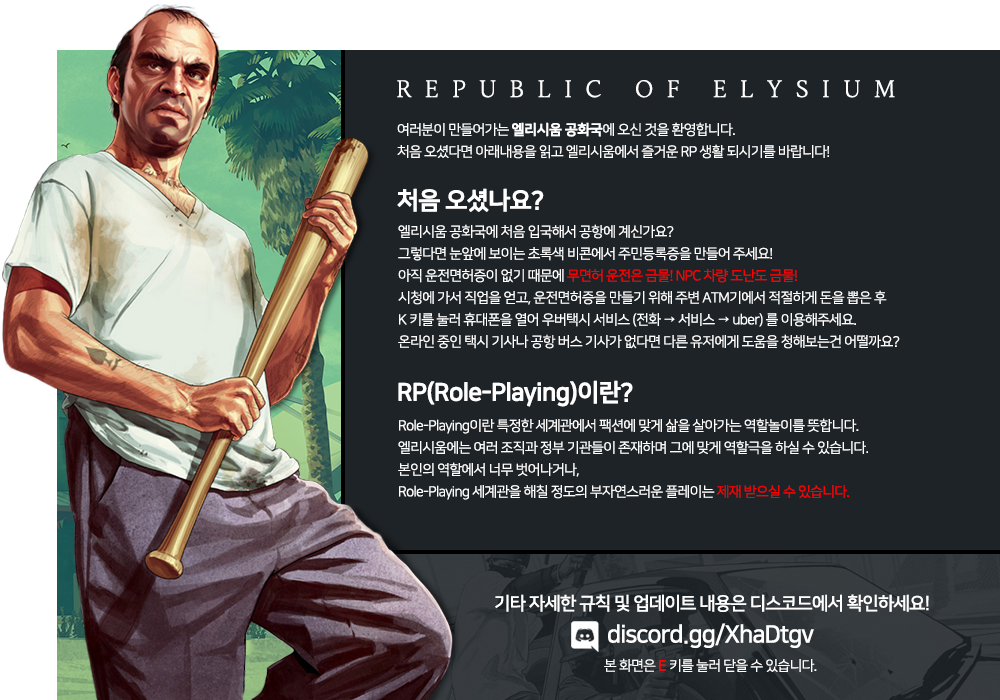
<style>
.page{position:relative;width:1000px;height:700px;background:#1e2327}
.page>*{position:absolute;margin:0}
.t1{font:24px "Arita-buri-Medium_TTF";letter-spacing:0.55em;color:#ffffff}
.t2{font:14px/22px "NanumSquareR";letter-spacing:-0.045em;color:#ffffff}
.t3{font:14px/22px "NanumSquareB";letter-spacing:-0.045em;color:#ffffff;font-weight:bold}
.t4{font:24px "NanumSquareB";letter-spacing:-0.045em;color:#ffffff;font-weight:bold}
.t5{font:14px/22px "NanumSquareR";letter-spacing:-0.045em;color:#ff0000}
.t6{font:18px "NanumSquareB";letter-spacing:-0.045em;color:#ffffff}
.t7{font:24px "NanumSquareB";letter-spacing:-0.045em;color:#ffffff}
.t8{font:14px "NanumSquareR";letter-spacing:-0.045em;color:#ffffff}
.t9{font:14px "NanumSquareR";letter-spacing:-0.045em;color:#ff0000;font-weight:bold}
</style>
<div class="page">
<p class="t1" style="left:397px;top:80px;width:498px;height:18px">REPUBLIC OF ELYSIUM</p>
<p class="t2" style="left:397px;top:122px;width:432px;height:37px">여러분이 만들어가는 <span class="t3">엘리시움 공화국</span>에 오신 것을 환영합니다.<br>처음 오셨다면 아래내용을 읽고 엘리시움에서 즐거운 RP 생활 되시기를 바랍니다!</p>
<p class="t4" style="left:397px;top:188px;width:147px;height:24px">처음 오셨나요?</p>
<p class="t2" style="left:398px;top:224px;width:502px;height:125px">엘리시움 공화국에 처음 입국해서 공항에 계신가요?<br>그렇다면 눈앞에 보이는 초록색 비콘에서 주민등록증을 만들어 주세요!<br>아직 운전면허증이 없기 때문에 <span class="t5">무면허 운전은 금물! NPC 차량 도난도 금물!<br></span>시청에 가서 직업을 얻고, 운전면허증을 만들기 위해 주변 ATM기에서 적절하게 돈을 뽑은 후<br>K 키를 눌러 휴대폰을 열어 우버택시 서비스 (전화 → 서비스 → uber) 를 이용해주세요.<br>온라인 중인 택시 기사나 공항 버스 기사가 없다면 다른 유저에게 도움을 청해보는건 어떨까요?</p>
<p class="t4" style="left:398px;top:380px;width:235px;height:27px">RP(Role-Playing)이란?</p>
<p class="t2" style="left:398px;top:418px;width:470px;height:82px">Role-Playing이란 특정한 세계관에서 팩션에 맞게 삶을 살아가는 역할놀이를 뜻합니다.<br>엘리시움에는 여러 조직과 정부 기관들이 존재하며 그에 맞게 역할극을 하실 수 있습니다.<br>본인의 역할에서 너무 벗어나거나,<br>Role-Playing 세계관을 해칠 정도의 부자연스러운 플레이는 <span class="t5">제재 받으실 수 있습니다.</span></p>
<p class="t6" style="left:495px;top:594px;width:434px;height:18px">기타 자세한 규칙 및 업데이트 내용은 디스코드에서 확인하세요!</p>
<p class="t7" style="left:608px;top:623px;width:206px;height:25px">discord.gg/XhaDtgv</p>
<p class="t8" style="left:604px;top:658px;width:213px;height:14px">본 화면은 <span class="t9">E</span> 키를 눌러 닫을 수 있습니다.</p>
</div>
